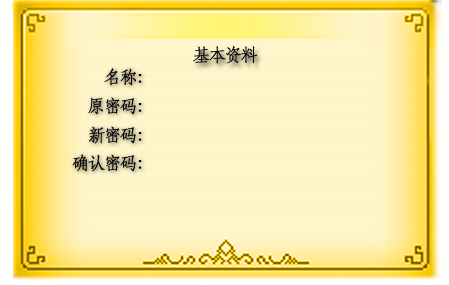
<style>
.page{position:relative;width:449px;height:285px;background:#fff4c7}
.page>*{position:absolute;margin:0}
.t1{font:18px "STFangsong";letter-spacing:-0.14em;color:#010101;font-weight:bold}
.t2{font:18px "STFangsong";letter-spacing:-0.14em;color:#000000;font-weight:bold}
</style>
<div class="page">
<p class="t1" style="left:193px;top:46px;width:65px;height:18px">基本资料</p>
<p class="t2" style="left:104px;top:68px;width:38px;height:18px">名称：</p>
<p class="t2" style="left:88px;top:97px;width:54px;height:18px">原密码：</p>
<p class="t2" style="left:89px;top:126px;width:53px;height:18px">新密码：</p>
<p class="t2" style="left:72px;top:154px;width:70px;height:18px">确认密码：</p>
</div>
